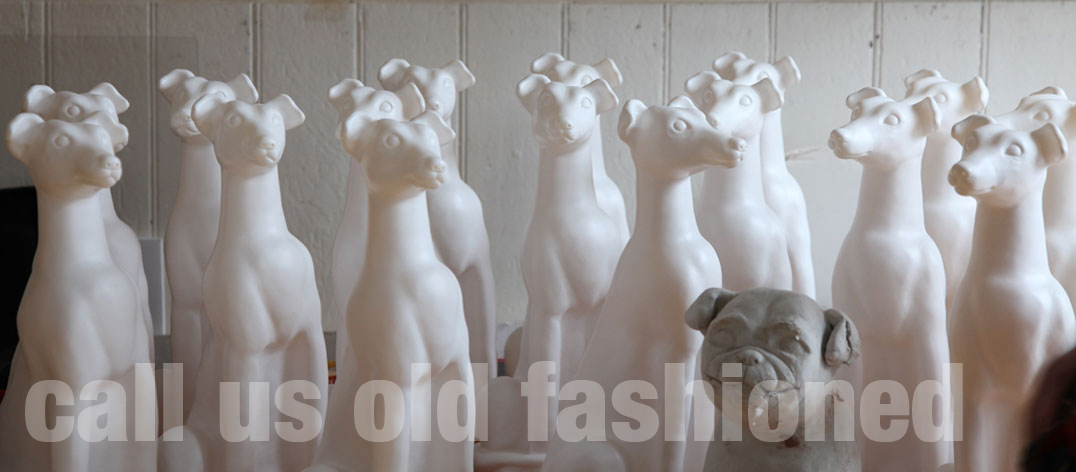
<style>
.page{position:relative;width:1076px;height:472px}
.page>*{position:absolute;margin:0}
.t1{font:109.6px "HelveticaNeue-CondensedBlack"}
</style>
<div class="page">
<p class="t1" style="left:25px;top:361px;width:938px;height:82px">call us old fashioned</p>
</div>
